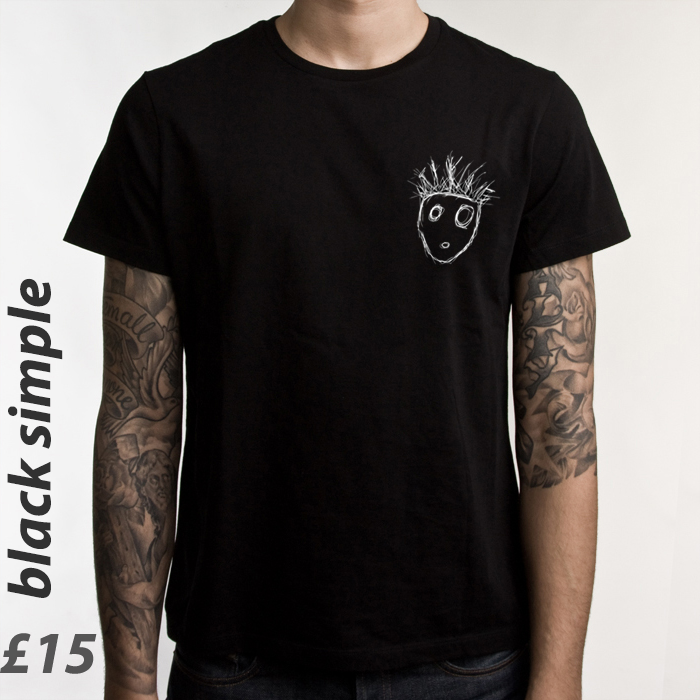
<style>
.page{position:relative;width:700px;height:700px}
.page>*{position:absolute;margin:0}
.t1{font:60px "MyriadPro-BoldIt";color:#313131}
</style>
<div class="page">
<p class="t1" style="left:7px;top:278px;width:56px;height:320px;rotate:-90deg">black simple</p>
</div>
